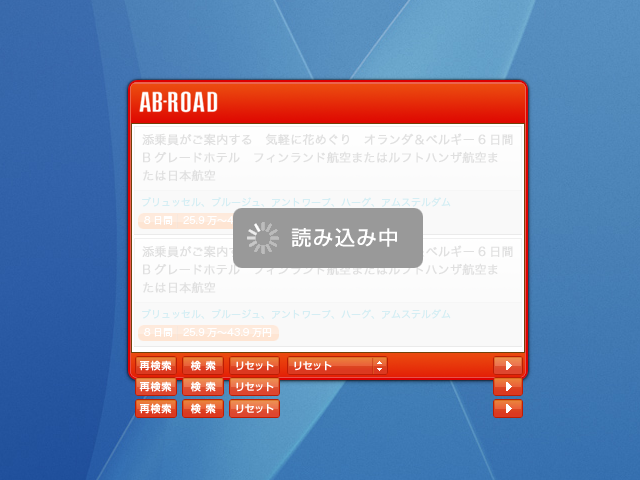
<style>
.page{position:relative;width:640px;height:480px}
.page>*{position:absolute;margin:0}
.t1{font:12px/18px "HiraKakuPro-W3";color:#e0e0e0;font-weight:bold}
.t2{font:10px "HiraKakuPro-W3";color:#d5eef4}
.t3{font:20px "ShinGoPro-Regular";letter-spacing:0.06em;color:#ffffff;font-weight:bold}
.t4{font:10px "HiraKakuPro-W3";color:#ffffff}
.t5{font:10px "ShinGoPro-Medium";letter-spacing:0.06em;color:#ffffff;font-weight:bold}
.t6{font:10px "ShinGoPro-Medium";letter-spacing:-0.06em;color:#ffffff;font-weight:bold}
</style>
<div class="page">
<p class="t1" style="left:142px;top:133px;width:371px;height:49px">添乗員がご案内する　気軽に花めぐり　オランダ＆ベルギー6日間<br>Bグレードホテル　フィンランド航空またはルフトハンザ航空ま<br>たは日本航空</p>
<p class="t2" style="left:142px;top:197px;width:309px;height:10px">ブリュッセル、ブルージュ、アントワープ、ハーグ、アムステルダム</p>
<p class="t3" style="left:291px;top:228px;width:106px;height:19px">読み込み中</p>
<p class="t2" style="left:142px;top:309px;width:309px;height:10px">ブリュッセル、ブルージュ、アントワープ、ハーグ、アムステルダム</p>
<p class="t4" style="left:144px;top:328px;width:128px;height:9px">8日間  25.9万〜43.9万円</p>
<p class="t5" style="left:139px;top:360px;width:33px;height:11px">再検索</p>
<p class="t5" style="left:190px;top:360px;width:26px;height:11px">検 索</p>
<p class="t6" style="left:236px;top:361px;width:38px;height:10px">リセット</p>
<p class="t6" style="left:294px;top:361px;width:38px;height:10px">リセット</p>
<p class="t5" style="left:139px;top:381px;width:33px;height:11px">再検索</p>
<p class="t5" style="left:190px;top:381px;width:26px;height:11px">検 索</p>
<p class="t6" style="left:236px;top:382px;width:38px;height:10px">リセット</p>
<p class="t5" style="left:139px;top:403px;width:33px;height:11px">再検索</p>
<p class="t5" style="left:190px;top:403px;width:26px;height:11px">検 索</p>
<p class="t6" style="left:236px;top:404px;width:38px;height:10px">リセット</p>
</div>
